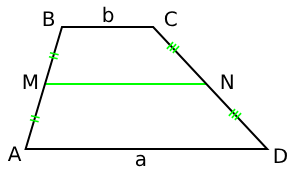
<style>
.page{position:relative;width:297px;height:174px;background:#ffffff}
.page>*{position:absolute;margin:0}
.t1{font:20px "DejaVuSans";color:#000000}
</style>
<div class="page">
<p class="t1" style="left:103px;top:6px;width:11px;height:17px">b</p>
<p class="t1" style="left:43px;top:11px;width:12px;height:15px">B</p>
<p class="t1" style="left:164px;top:11px;width:13px;height:16px">C</p>
<p class="t1" style="left:23px;top:74px;width:15px;height:15px">M</p>
<p class="t1" style="left:221px;top:74px;width:12px;height:15px">N</p>
<p class="t1" style="left:7px;top:146px;width:15px;height:15px">A</p>
<p class="t1" style="left:274px;top:148px;width:13px;height:15px">D</p>
<p class="t1" style="left:135px;top:154px;width:11px;height:13px">a</p>
</div>
